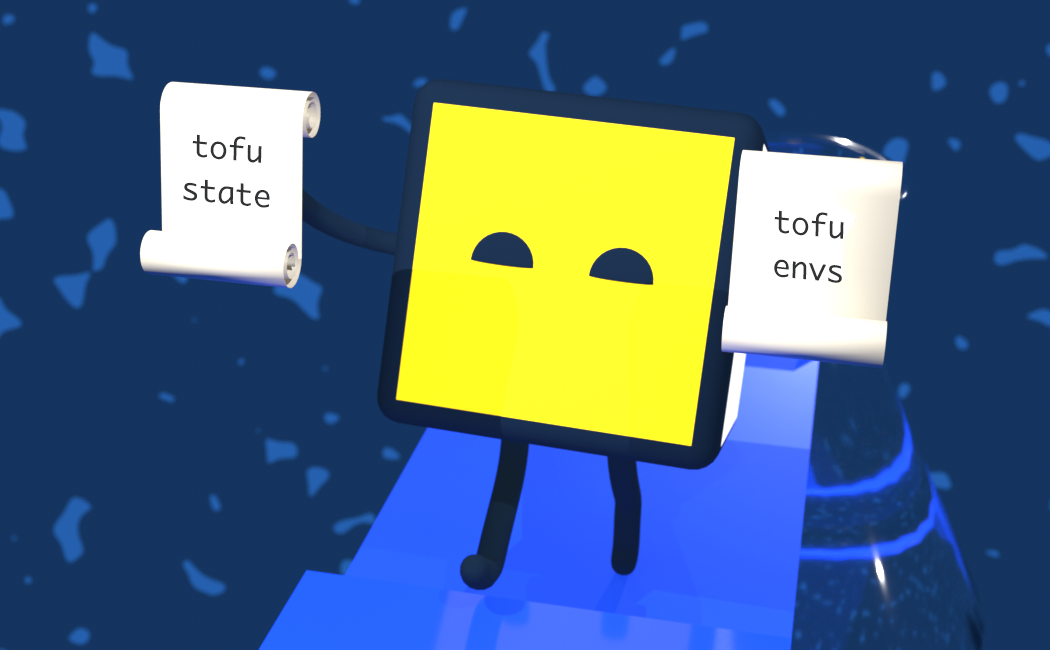
<style>
.page{position:relative;width:1050px;height:650px;background:#14345f}
.page>*{position:absolute;margin:0}
.t1{font:30px/44px "Monaco";color:#323335}
</style>
<div class="page">
<p class="t1" style="left:183px;top:134px;width:87px;height:74px;text-align:center;rotate:6deg">tofu<br>state</p>
<p class="t1" style="left:774px;top:210px;width:70px;height:73px;text-align:center;rotate:6deg">tofu<br>envs</p>
</div>
